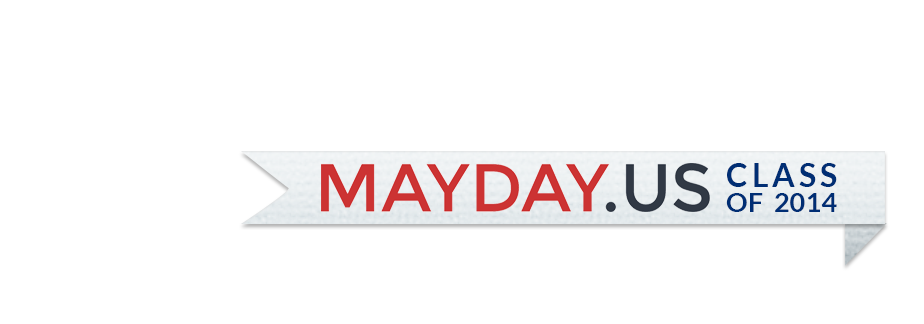
<style>
.page{position:relative;width:924px;height:324px;background:#ffffff}
.page>*{position:absolute;margin:0}
.t1{font:27.4px/25px "Lato-Bold";color:#002e74}
.t2{font:32.4px/25px "Lato-Bold";letter-spacing:-0.04em;color:#002e74}
</style>
<div class="page">
<p class="t1" style="left:726px;top:163px;width:111px;height:49px;text-align:justify"><span class="t2">CLASS<br></span>OF 2014</p>
</div>
